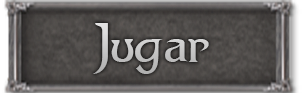
<style>
.page{position:relative;width:302px;height:93px}
.page>*{position:absolute;margin:0}
.t1{font:62.8px "Dumbledor1";color:#c6c6c6}
</style>
<div class="page">
<p class="t1" style="left:93px;top:23px;width:116px;height:51px">Jugar</p>
</div>
